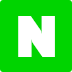
<style>
.page{position:relative;width:72px;height:72px;background:#00d400}
.page>*{position:absolute;margin:0}
.t1{font:54.9px "BlackHanSans-Regular";letter-spacing:0.1em;color:#ffffff}
</style>
<div class="page">
<p class="t1" style="left:18px;top:16px;width:37px;height:41px">N</p>
</div>
